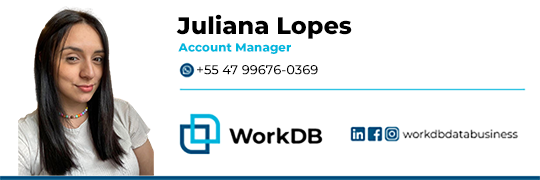
<style>
.page{position:relative;width:540px;height:180px;background:#ffffff}
.page>*{position:absolute;margin:0}
.t1{font:24px "Montserrat-ExtraBold";color:#000000}
.t2{font:11.9px "Montserrat-ExtraBold";color:#00b8de}
.t3{font:13px "MontserratRoman-Medium";color:#000000}
</style>
<div class="page">
<p class="t1" style="left:176px;top:14px;width:176px;height:25px">Juliana Lopes</p>
<p class="t2" style="left:178px;top:43px;width:113px;height:11px">Account Manager</p>
<p class="t3" style="left:197px;top:65px;width:121px;height:10px">+55 47 99676-0369</p>
</div>
